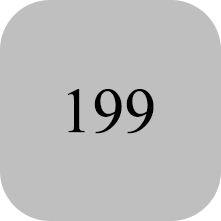
<style>
.page{position:relative;width:221px;height:221px;background:#bfbfbf}
.page>*{position:absolute;margin:0}
.t1{font:63.9px "TimesNewRomanPSMT";color:#000000}
</style>
<div class="page">
<p class="t1" style="left:67px;top:89px;width:87px;height:45px">199</p>
</div>
